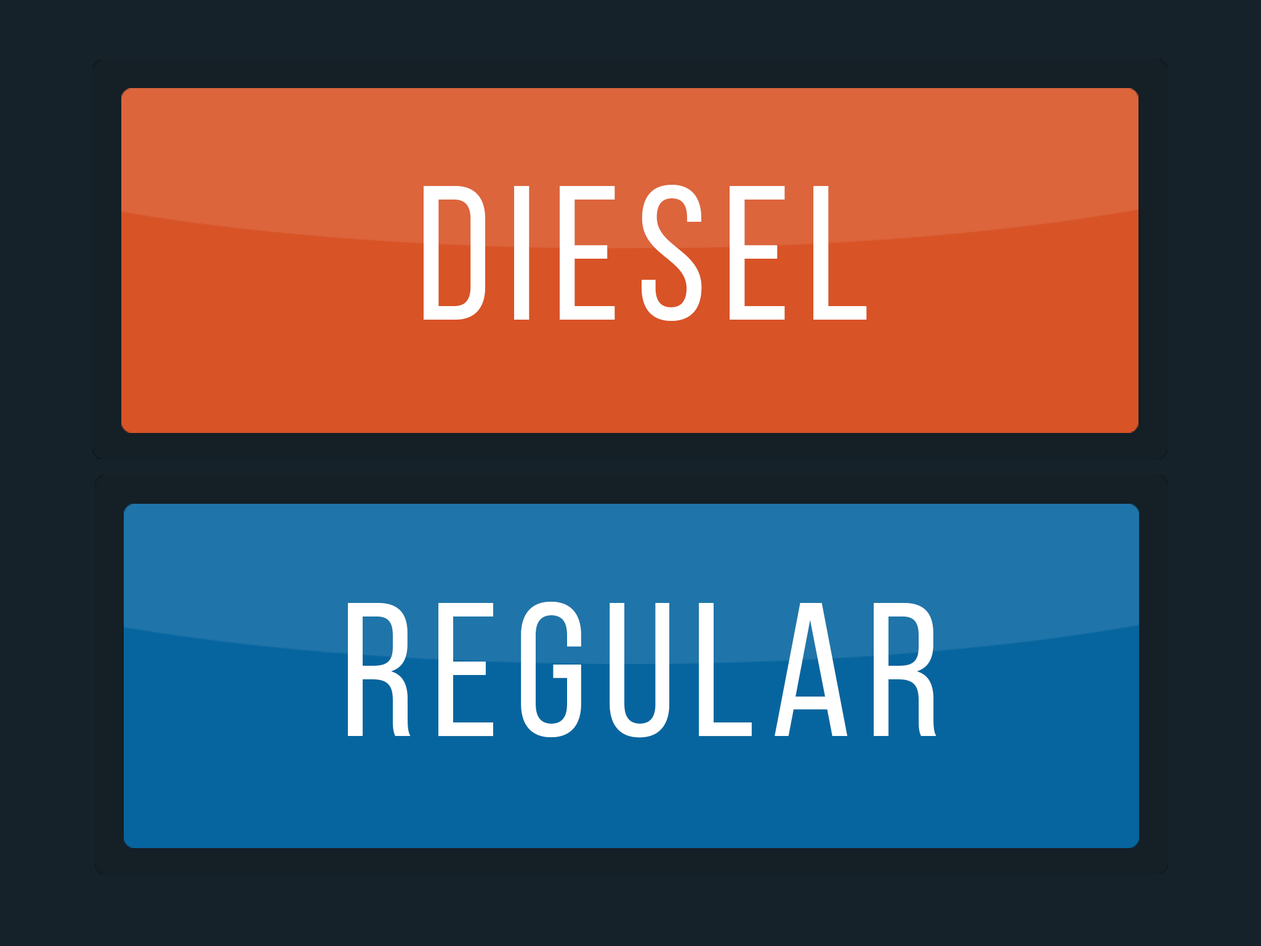
<style>
.page{position:relative;width:1261px;height:946px;background:#16222a}
.page>*{position:absolute;margin:0}
.t1{font:190.6px "BebasNeueRegular";letter-spacing:0.08em;color:#ffffff}
.t2{font:190.3px "BebasNeueRegular";letter-spacing:0.08em;color:#ffffff}
</style>
<div class="page">
<p class="t1" style="left:424px;top:185px;width:443px;height:136px">diesel</p>
<p class="t2" style="left:348px;top:602px;width:588px;height:136px">regular</p>
</div>
